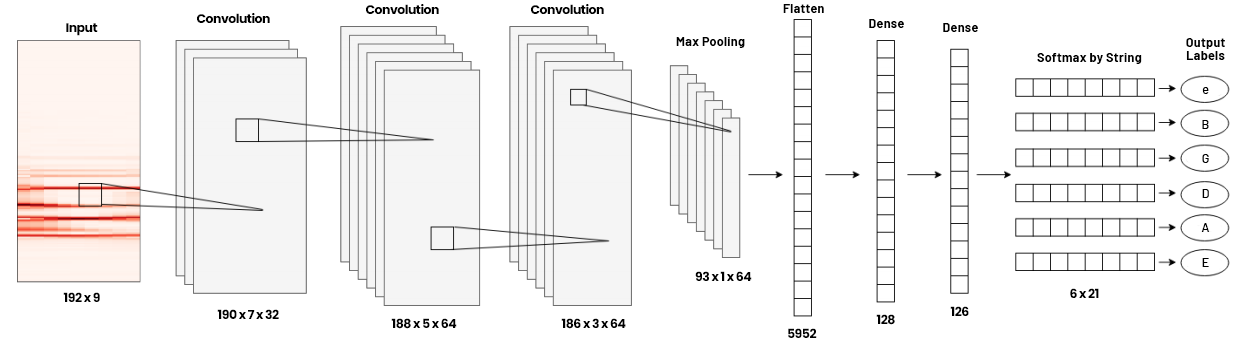
<style>
.page{position:relative;width:1244px;height:344px;background:#ffffff}
.page>*{position:absolute;margin:0}
.t1{font:12.5px "Poppins-Bold";letter-spacing:-0.04em;color:#000000}
.t2{font:12.5px "Barlow-Bold";letter-spacing:0.025em;color:#000000}
.t3{font:12.5px/11.5px "Barlow-Medium";letter-spacing:0.025em;color:#000000}
.t4{font:12.5px/12.5px "Barlow-Bold";letter-spacing:0.025em;color:#000000}
</style>
<div class="page">
<p class="t1" style="left:366px;top:4px;width:73px;height:10px">Convolution</p>
<p class="t1" style="left:531px;top:4px;width:73px;height:10px">Convolution</p>
<p class="t2" style="left:783px;top:4px;width:41px;height:9px">Flatten</p>
<p class="t1" style="left:197px;top:13px;width:73px;height:10px">Convolution</p>
<p class="t1" style="left:66px;top:23px;width:32px;height:13px">Input</p>
<p class="t2" style="left:869px;top:19px;width:35px;height:9px">Dense</p>
<p class="t2" style="left:943px;top:23px;width:35px;height:9px">Dense</p>
<p class="t2" style="left:676px;top:37px;width:69px;height:11px">Max Pooling</p>
<p class="t3" style="left:1186px;top:38px;width:39px;height:229px;text-align:center"><span class="t4">Output<br>Labels<br><br><br></span>e<br><br><br>B<br><br><br>G<br><br><br>D<br><br><br>A<br><br><br>E</p>
<p class="t2" style="left:1037px;top:53px;width:105px;height:11px">Softmax by String</p>
<p class="t1" style="left:695px;top:271px;width:57px;height:10px">93 x 1 x 64</p>
<p class="t1" style="left:63px;top:292px;width:37px;height:10px">192 x 9</p>
<p class="t1" style="left:1070px;top:288px;width:29px;height:10px">6 x 21</p>
<p class="t1" style="left:217px;top:309px;width:62px;height:10px">190 x 7 x 32</p>
<p class="t1" style="left:391px;top:318px;width:66px;height:11px">188 x 5 x 64</p>
<p class="t1" style="left:561px;top:318px;width:65px;height:11px">186 x 3 x 64</p>
<p class="t1" style="left:876px;top:314px;width:19px;height:11px">128</p>
<p class="t1" style="left:950px;top:306px;width:19px;height:10px">126</p>
<p class="t1" style="left:788px;top:328px;width:29px;height:10px">5952</p>
</div>
